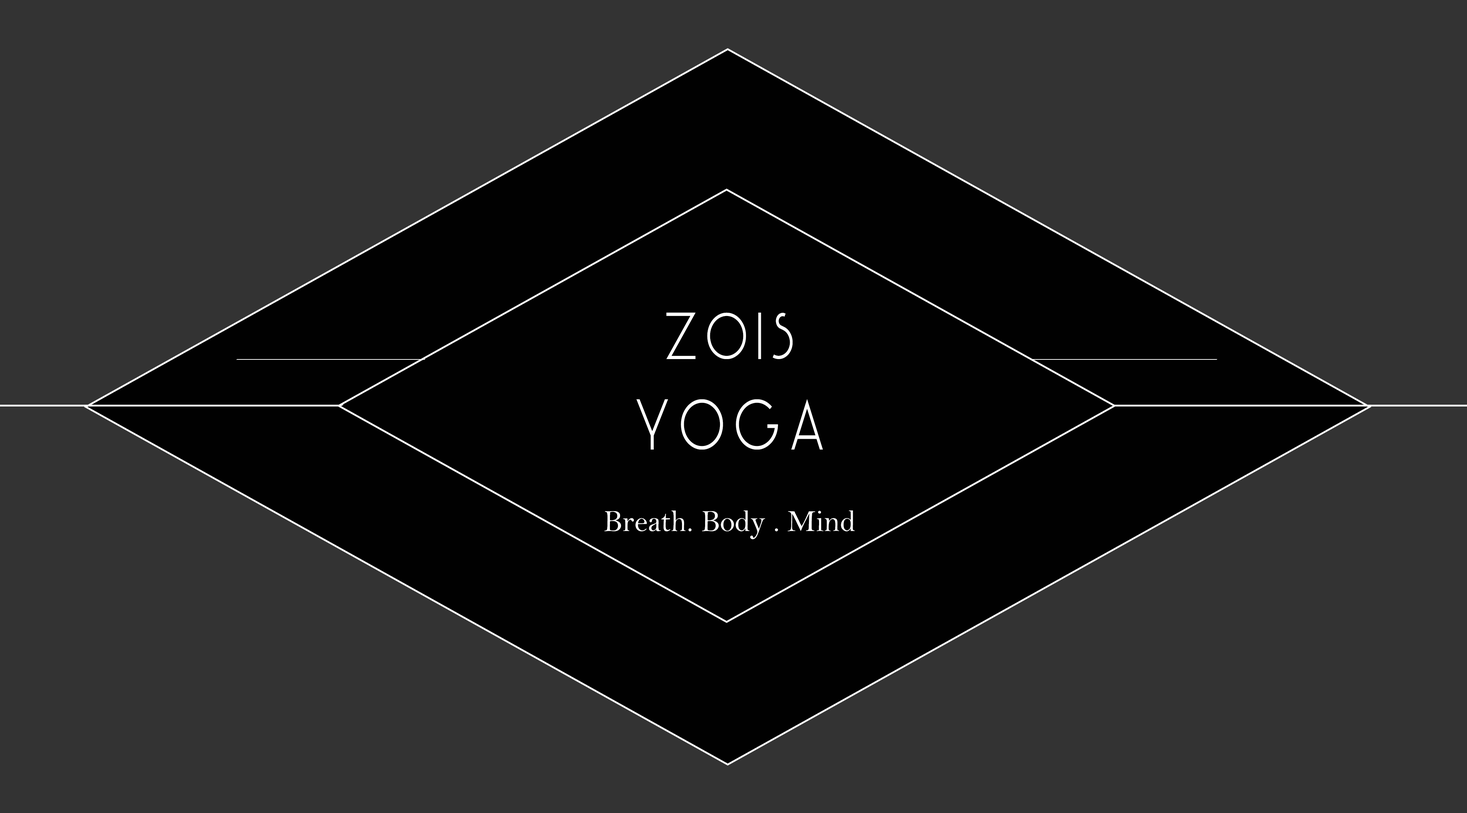
<style>
.page{position:relative;width:1467px;height:813px;background:#333333}
.page>*{position:absolute;margin:0}
.t1{font:30.6px/25.6px "BellMT";color:#ffffff}
.t2{font:29.6px "MANIFESTO";color:#ffffff}
.t3{font:63.3px "MANIFESTO";letter-spacing:0.035em;color:#ffffff;scale:0.83 1}
.t4{font:63.3px/45.2px "MANIFESTO";letter-spacing:0.035em;color:#ffffff;scale:0.83 1}
.t5{font:68.7px/45.2px "MANIFESTO";letter-spacing:0.035em;color:#ffffff;scale:0.83 1}
</style>
<div class="page">
<p class="t1" style="left:604px;top:312px;width:251px;height:227px"><span class="t2"><br><br></span><span class="t3">Z</span><span class="t4">ois<br></span><span class="t5"><br>Yoga<br><br><br></span>Breath. Body . Mind</p>
</div>
